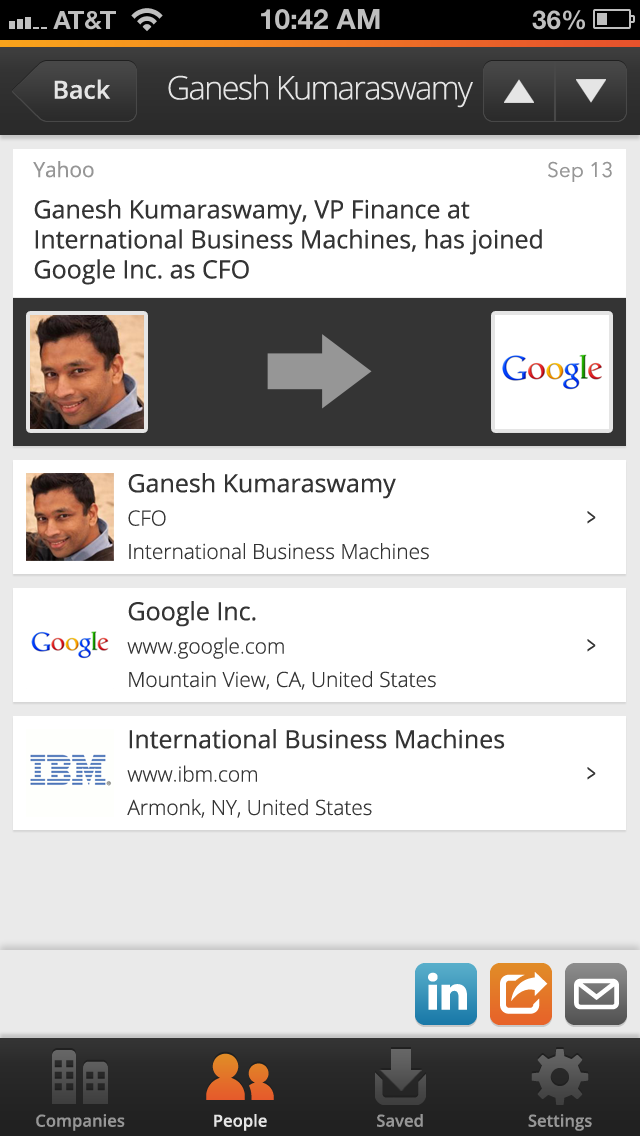
<style>
.page{position:relative;width:640px;height:1136px;background:#ffffff}
.page>*{position:absolute;margin:0}
.t1{font:32.5px "OpenSans-Light";letter-spacing:-0.05em;color:#e5e5e5}
.t2{font:25px "OpenSans-Semibold";color:#e5e5e5}
.t3{font:25px "OpenSans";color:#343434}
.t4{font:20.8px "OpenSans";color:#969696}
.t5{font:20.8px "AvenirNext-Regular";color:#969696}
.t6{font:20.8px "OpenSans-Light";color:#343434}
.t7{font:25px "OpenSans";color:#343434;scale:0.64 1}
.t8{font:16.7px "OpenSans-Semibold";color:#969696}
.t9{font:16.7px "OpenSans-Semibold";color:#e5e5e5}
</style>
<div class="page">
<p class="t1" style="left:168px;top:74px;width:305px;height:34px">Ganesh Kumaraswamy</p>
<p class="t2" style="left:54px;top:79px;width:57px;height:20px">Back</p>
<p class="t3" style="left:33px;top:161px;width:509px;height:124px"><span class="t4">Yahoo<br></span>Ganesh Kumaraswamy, VP Finance at International Business Machines, has joined Google Inc. as CFO</p>
<p class="t5" style="left:548px;top:161px;width:64px;height:21px">Sep 13</p>
<p class="t6" style="left:128px;top:473px;width:301px;height:87px"><span class="t3">Ganesh Kumaraswamy<br></span>CFO<br>International Business Machines</p>
<p class="t7" style="left:587px;top:511px;width:9px;height:13px">&gt;</p>
<p class="t6" style="left:127px;top:601px;width:309px;height:89px"><span class="t3">Google Inc.<br></span>www.google.com<br>Mountain View, CA, United States</p>
<p class="t7" style="left:587px;top:639px;width:9px;height:13px">&gt;</p>
<p class="t6" style="left:127px;top:729px;width:378px;height:89px"><span class="t3">International Business Machines<br></span>www.ibm.com<br>Armonk, NY, United States</p>
<p class="t7" style="left:587px;top:767px;width:9px;height:13px">&gt;</p>
<p class="t8" style="left:36px;top:1114px;width:89px;height:17px">Companies</p>
<p class="t9" style="left:214px;top:1114px;width:53px;height:17px">People</p>
<p class="t8" style="left:377px;top:1114px;width:46px;height:13px">Saved</p>
<p class="t8" style="left:528px;top:1114px;width:64px;height:17px">Settings</p>
</div>
